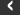
<style>
.page{position:relative;width:20px;height:15px;background:#333333}
.page>*{position:absolute;margin:0}
.t1{font:12px "Seoul-Headline";color:#ffffff}
</style>
<div class="page">
<p class="t1" style="left:7px;top:0px;width:6px;height:11px">&lt;</p>
</div>
